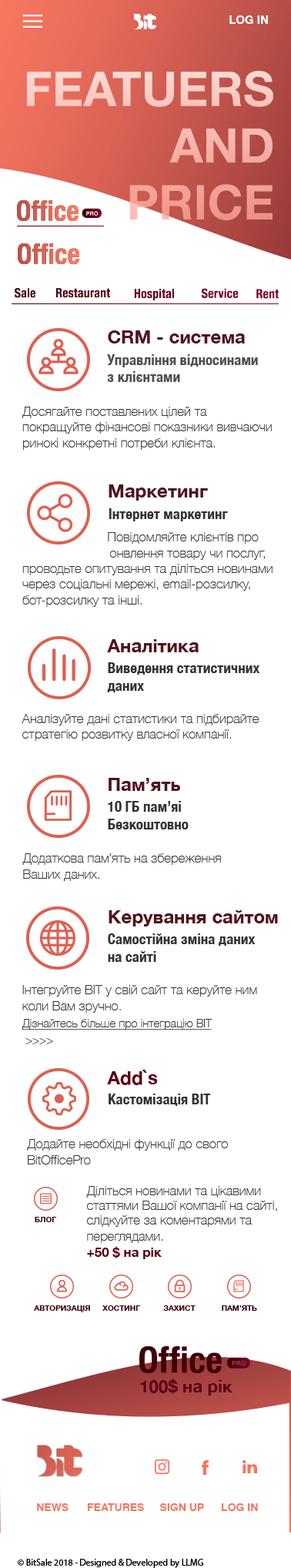
<style>
.page{position:relative;width:291px;height:1568px;background:#ffffff}
.page>*{position:absolute;margin:0}
.t1{font:11.6px "Helvetica-Bold";color:#ffffff;font-variant:small-caps}
.t2{font:18.5px "HelveticaNeue-Bold";color:#50141e}
.t3{font:14.6px "HelveticaNeue-CondensedBold";color:#4f4f4f}
.t4{font:13.1px "HelveticaNeue-Thin";color:#333333}
.t5{font:14.6px "HelveticaNeue-CondensedBold";color:#333333}
.t6{font:11.6px/16.9px "HelveticaNeue-Thin";color:#333333;text-decoration:underline}
.t7{font:11.6px/16.9px "HelveticaNeue-Thin";color:#333333}
.t8{font:18.5px "HelveticaNeue-Bold";color:#5b0016}
.t9{font:13.1px/14.6px "HelveticaNeue-Thin";color:#333333}
.t10{font:13.1px/16.2px "HelveticaNeue-Thin";color:#333333}
.t11{font:13.1px/16.2px "HelveticaNeue-Bold";color:#5b0016}
.t12{font:7.7px "HelveticaNeue-Bold";color:#37020e}
.t13{font:10.8px "Helvetica-Bold";color:#f5755f;font-variant:small-caps}
.t14{font:9.2px "MyriadPro-Regular";color:#000000}
</style>
<div class="page">
<p class="t1" style="left:230px;top:15px;width:38px;height:9px">LOG IN</p>
<p class="t2" style="left:108px;top:330px;width:137px;height:13px">CRM - система</p>
<p class="t3" style="left:107px;top:354px;width:151px;height:28px">Управління відносинами <br>з клієнтами</p>
<p class="t4" style="left:22px;top:407px;width:250px;height:43px">Досягайте поставлених цілей та покращуйте фінансові показники вивчаючи ринокі конкретні потреби клієнта.</p>
<p class="t2" style="left:109px;top:484px;width:99px;height:17px">Маркетинг</p>
<p class="t5" style="left:109px;top:508px;width:119px;height:13px">Інтернет маркетинг</p>
<p class="t4" style="left:22px;top:532px;width:251px;height:75px">Повідомляйте клієнтів про                           онвлення товару чи послуг, проводьте опитування та діліться новинами через соціальні мережі, email-розсилку, бот-розсилку та інші.</p>
<p class="t2" style="left:107px;top:639px;width:92px;height:13px">Аналітика</p>
<p class="t5" style="left:107px;top:662px;width:153px;height:30px">Виведення статистичних <br>даних</p>
<p class="t4" style="left:22px;top:714px;width:238px;height:27px">Аналізуйте дані статистики та підбирайте <br>стратегію розвитку власної компанії.</p>
<p class="t2" style="left:109px;top:778px;width:71px;height:13px">Пам’ять</p>
<p class="t5" style="left:108px;top:801px;width:81px;height:28px">10 ГБ пам’яі<br>Безкоштовно</p>
<p class="t4" style="left:22px;top:853px;width:199px;height:28px">Додаткова пам’ять на збереження<br>Ваших даних.</p>
<p class="t2" style="left:109px;top:910px;width:169px;height:16px">Керування сайтом</p>
<p class="t5" style="left:108px;top:933px;width:148px;height:29px">Самостійна зміна даних <br>на сайті</p>
<p class="t4" style="left:22px;top:985px;width:235px;height:59px">Інтегруйте ВІТ у свій сайт та керуйте ним коли Вам зручно.<br><span class="t6">Дізнайтесь більше про інтеграцію BIT<br></span><span class="t7"> &gt;&gt;&gt;&gt;</span></p>
<p class="t8" style="left:107px;top:1070px;width:51px;height:15px">Add`s</p>
<p class="t5" style="left:109px;top:1094px;width:102px;height:12px">Кастомізація ВІТ</p>
<p class="t4" style="left:27px;top:1139px;width:201px;height:25px">Додайте необхідні функції до свого <br>BitOfficePro</p>
<p class="t9" style="left:86px;top:1186px;width:191px;height:73px">Діліться новинами та цікавими статтями Вашої компанії на сайті, слідкуйте за коментарями та <span class="t10">переглядами.<br></span><span class="t11">+50 $ на рік</span></p>
<p class="t12" style="left:35px;top:1217px;width:22px;height:5px">БЛОГ</p>
<p class="t12" style="left:34px;top:1305px;width:56px;height:7px">АВТОРИЗАЦІЯ</p>
<p class="t12" style="left:102px;top:1305px;width:39px;height:6px">ХОСТИНГ</p>
<p class="t12" style="left:163px;top:1305px;width:33px;height:6px">ЗАХИСТ</p>
<p class="t12" style="left:222px;top:1305px;width:35px;height:6px">ПАМ’ЯТЬ</p>
<p class="t13" style="left:37px;top:1503px;width:32px;height:8px">NEWS</p>
<p class="t13" style="left:88px;top:1503px;width:56px;height:8px">FEATURES</p>
<p class="t13" style="left:160px;top:1503px;width:44px;height:8px">SIGN UP</p>
<p class="t13" style="left:222px;top:1503px;width:36px;height:8px">LOG IN</p>
<p class="t14" style="left:18px;top:1559px;width:185px;height:9px">© BitSale 2018 - Designed &amp; Developed by LLMG</p>
</div>
